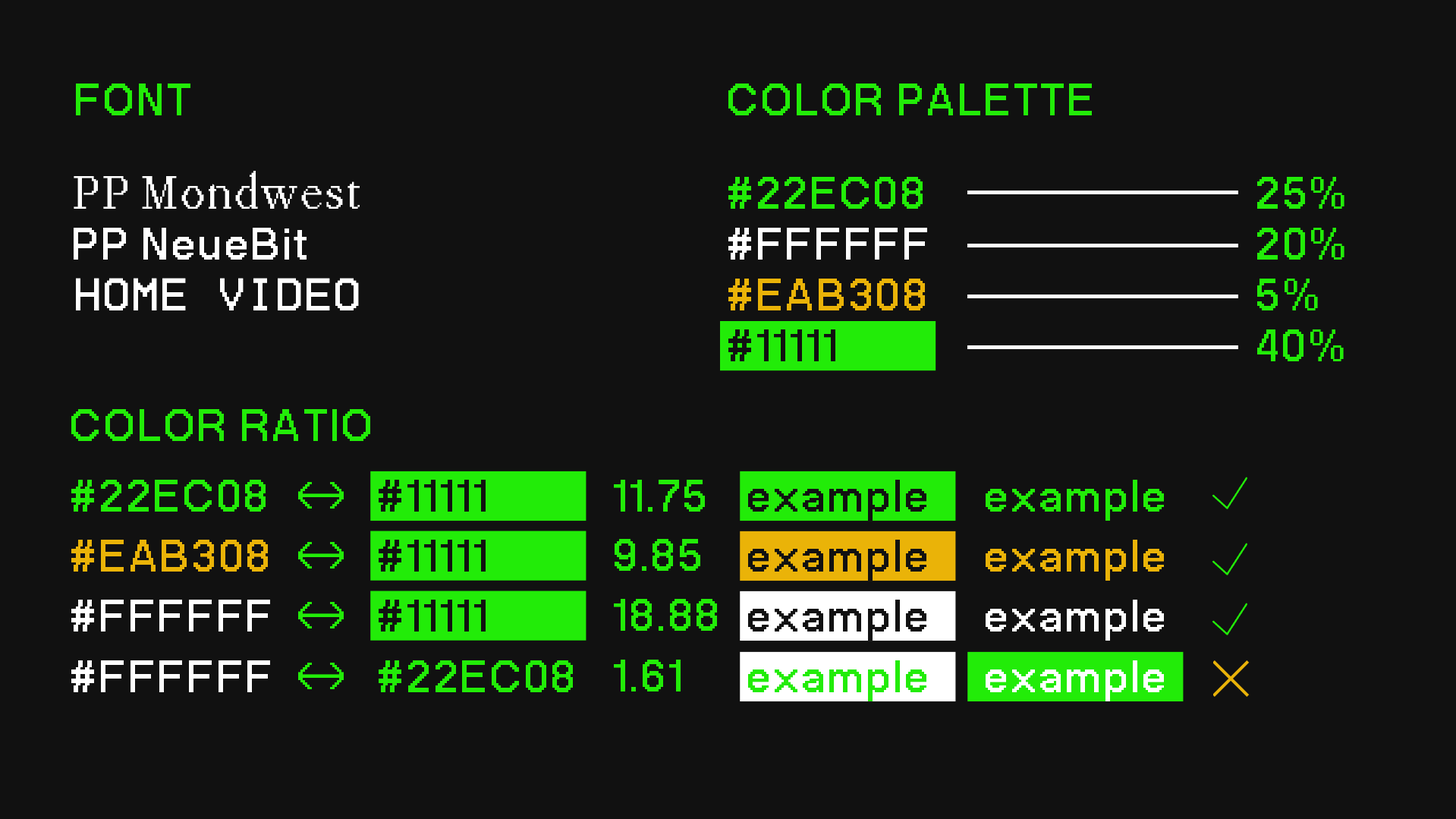
<style>
.page{position:relative;width:1456px;height:819px;background:#111111}
.page>*{position:absolute;margin:0}
.t1{font:64px "PPNeueBit-Bold";letter-spacing:0.03em;color:#22ec08}
.t2{font:49.6px "PPMondwest-Regular";letter-spacing:0.03em;color:#ffffff}
.t3{font:64px "PPNeueBit-Bold";letter-spacing:0.03em;color:#ffffff}
.t4{font:45.8px "HomeVideo-Regular";letter-spacing:0.03em;color:#ffffff}
.t5{font:64px "PPNeueBit-Bold";letter-spacing:0.03em;color:#eab308}
.t6{font:64px "PPNeueBit-Bold";letter-spacing:0.03em;color:#111111}
</style>
<div class="page">
<p class="t1" style="left:76px;top:83px;width:114px;height:32px">FONT</p>
<p class="t1" style="left:729px;top:83px;width:363px;height:32px">COLOR PALETTE</p>
<p class="t2" style="left:74px;top:171px;width:286px;height:38px">PP Mondwest</p>
<p class="t1" style="left:729px;top:177px;width:194px;height:32px">#22EC08</p>
<p class="t1" style="left:1257px;top:177px;width:88px;height:32px">25%</p>
<p class="t3" style="left:74px;top:228px;width:233px;height:32px">PP NeueBit</p>
<p class="t3" style="left:729px;top:228px;width:198px;height:32px">#FFFFFF</p>
<p class="t1" style="left:1257px;top:228px;width:88px;height:32px">20%</p>
<p class="t4" style="left:76px;top:278px;width:283px;height:32px">HOME VIDEO</p>
<p class="t5" style="left:729px;top:279px;width:196px;height:31px">#EAB308</p>
<p class="t1" style="left:1257px;top:279px;width:61px;height:31px">5%</p>
<p class="t6" style="left:729px;top:329px;width:107px;height:32px">#11111</p>
<p class="t1" style="left:1257px;top:329px;width:87px;height:32px">40%</p>
<p class="t1" style="left:71px;top:409px;width:299px;height:32px">COLOR RATIO</p>
<p class="t1" style="left:71px;top:480px;width:195px;height:31px">#22EC08</p>
<p class="t1" style="left:298px;top:482px;width:46px;height:26px">↔</p>
<p class="t6" style="left:379px;top:480px;width:107px;height:31px">#11111</p>
<p class="t1" style="left:614px;top:480px;width:91px;height:31px">11.75</p>
<p class="t6" style="left:748px;top:480px;width:179px;height:41px">example</p>
<p class="t1" style="left:986px;top:480px;width:178px;height:41px">example</p>
<p class="t5" style="left:71px;top:540px;width:197px;height:31px">#EAB308</p>
<p class="t1" style="left:298px;top:542px;width:46px;height:26px">↔</p>
<p class="t6" style="left:379px;top:540px;width:107px;height:31px">#11111</p>
<p class="t1" style="left:615px;top:539px;width:85px;height:32px">9.85</p>
<p class="t6" style="left:748px;top:540px;width:179px;height:41px">example</p>
<p class="t5" style="left:986px;top:540px;width:178px;height:41px">example</p>
<p class="t3" style="left:71px;top:600px;width:199px;height:31px">#FFFFFF</p>
<p class="t1" style="left:298px;top:602px;width:46px;height:26px">↔</p>
<p class="t6" style="left:379px;top:600px;width:107px;height:31px">#11111</p>
<p class="t1" style="left:614px;top:599px;width:103px;height:32px">18.88</p>
<p class="t6" style="left:748px;top:600px;width:179px;height:40px">example</p>
<p class="t3" style="left:986px;top:600px;width:178px;height:40px">example</p>
<p class="t3" style="left:71px;top:660px;width:199px;height:32px">#FFFFFF</p>
<p class="t1" style="left:298px;top:662px;width:46px;height:27px">↔</p>
<p class="t1" style="left:379px;top:660px;width:194px;height:32px">#22EC08</p>
<p class="t1" style="left:614px;top:659px;width:67px;height:32px">1.61</p>
<p class="t1" style="left:748px;top:660px;width:179px;height:41px">example</p>
<p class="t3" style="left:986px;top:660px;width:178px;height:41px">example</p>
</div>
